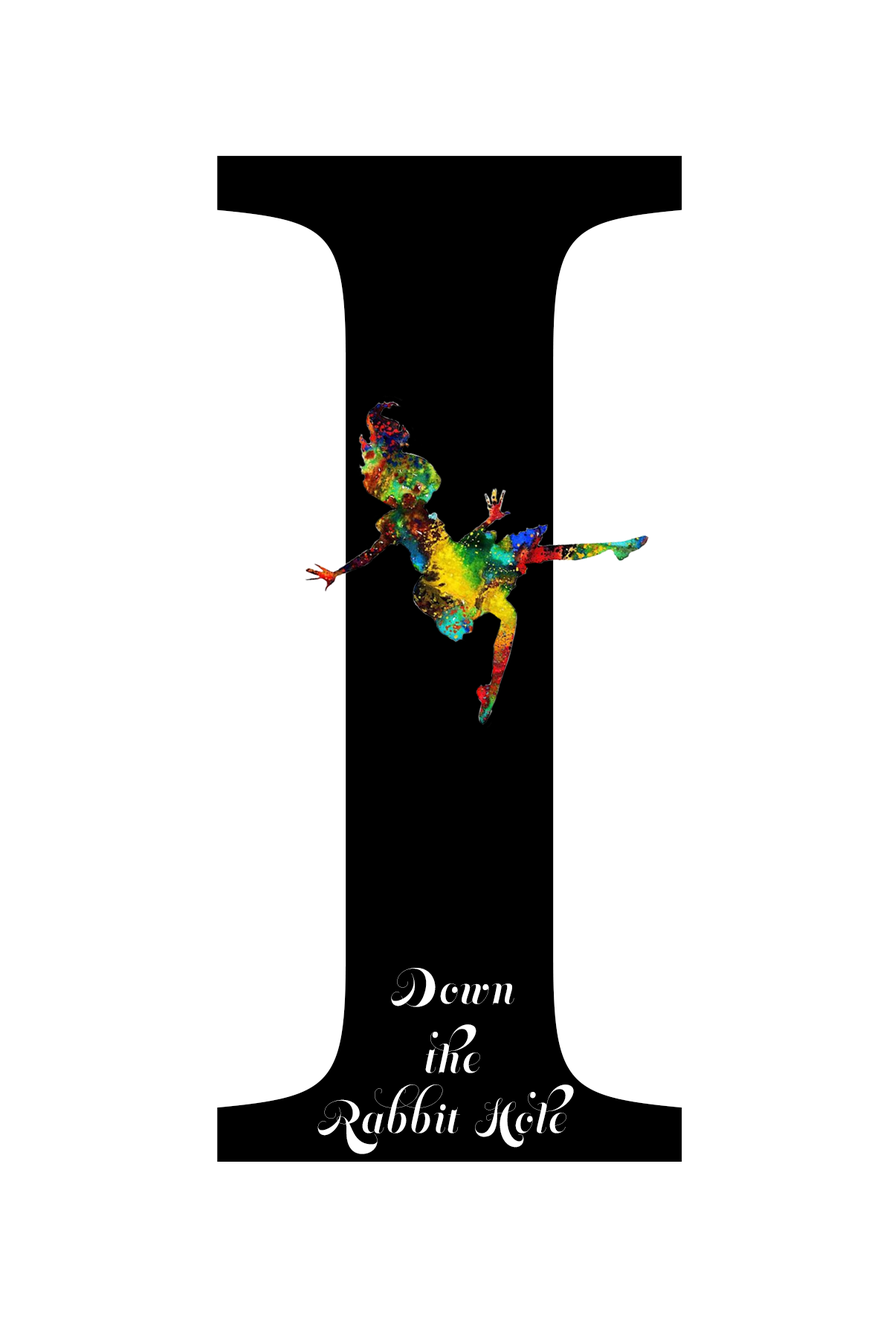
<style>
.page{position:relative;width:892px;height:1337px;background:#ffffff}
.page>*{position:absolute;margin:0}
.t1{font:1547.9px "MinionPro-Bold";letter-spacing:0.075em;color:#000000}
.t2{font:37.2px "MemoriamPro";letter-spacing:0.075em;color:#ffffff}
</style>
<div class="page">
<p class="t1" style="left:217px;top:155px;width:465px;height:1007px">I</p>
<p class="t2" style="left:391px;top:968px;width:123px;height:40px">Down</p>
<p class="t2" style="left:425px;top:1025px;width:55px;height:49px">the</p>
<p class="t2" style="left:317px;top:1085px;width:257px;height:70px">Rabbit Hole</p>
</div>
